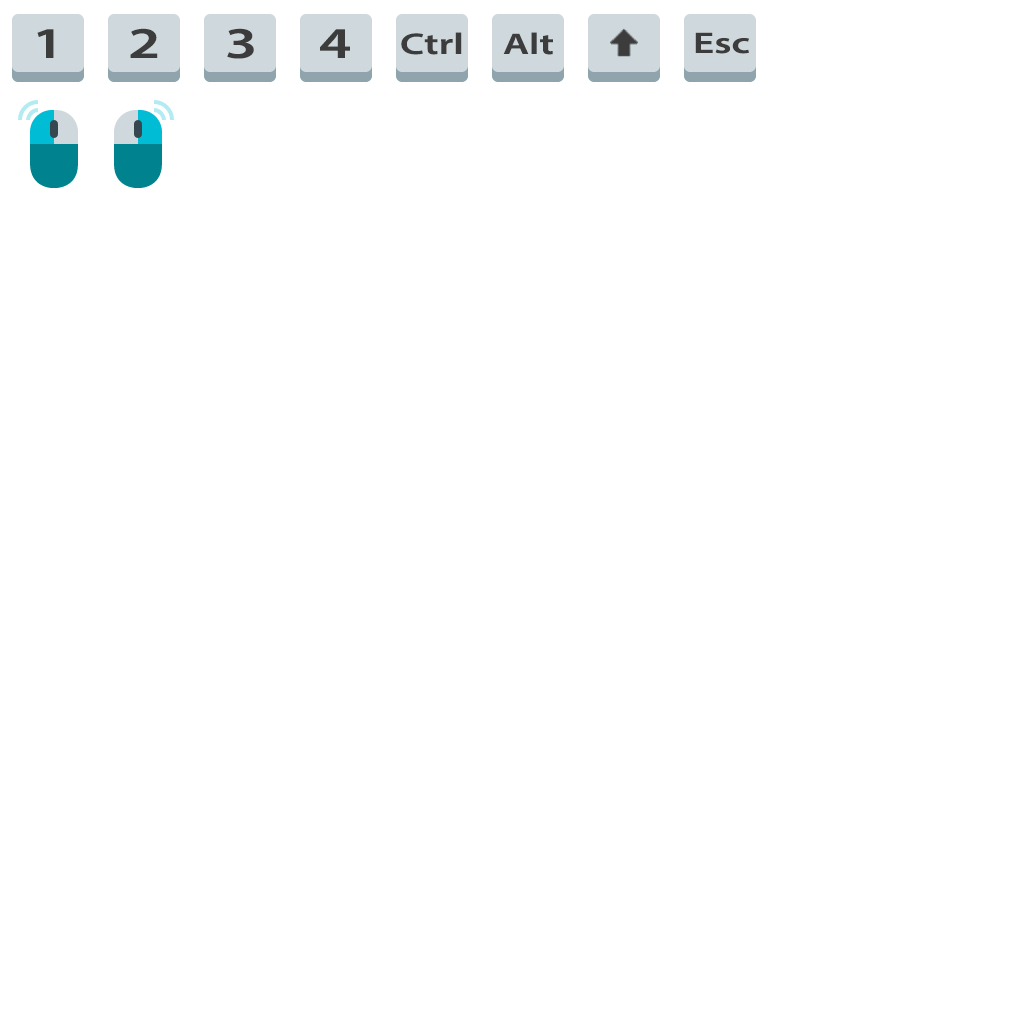
<style>
.page{position:relative;width:1024px;height:1024px;background:#ffffff}
.page>*{position:absolute;margin:0}
.t1{font:44px "MyriadPro-Semibold";color:#3c3c3c;scale:1.37 1}
.t2{font:30px "MyriadPro-Semibold";color:#3c3c3c;scale:1.37 1}
</style>
<div class="page">
<p class="t1" style="left:37px;top:29px;width:17px;height:29px">1</p>
<p class="t1" style="left:130px;top:28px;width:28px;height:30px">2</p>
<p class="t1" style="left:227px;top:28px;width:27px;height:31px">3</p>
<p class="t1" style="left:320px;top:29px;width:30px;height:29px">4</p>
<p class="t2" style="left:401px;top:32px;width:61px;height:23px">Ctrl</p>
<p class="t2" style="left:503px;top:32px;width:50px;height:23px">Alt</p>
<p class="t2" style="left:695px;top:32px;width:54px;height:22px">Esc</p>
</div>
